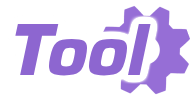
<style>
.page{position:relative;width:195px;height:100px;background:#ffffff}
.page>*{position:absolute;margin:0}
.t1{font:68px "Eurostile-BoldOblique";color:#8d66d0}
</style>
<div class="page">
<p class="t1" style="left:15px;top:23px;width:136px;height:53px">Tool</p>
</div>
